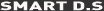
<style>
.page{position:relative;width:104px;height:11px;background:#333333}
.page>*{position:absolute;margin:0}
.t1{font:12px "DINPro-Black";color:#fcf7f7;text-transform:uppercase;scale:1.69 1}
</style>
<div class="page">
<p class="t1" style="left:0px;top:1px;width:103px;height:10px">smart d.S</p>
</div>
